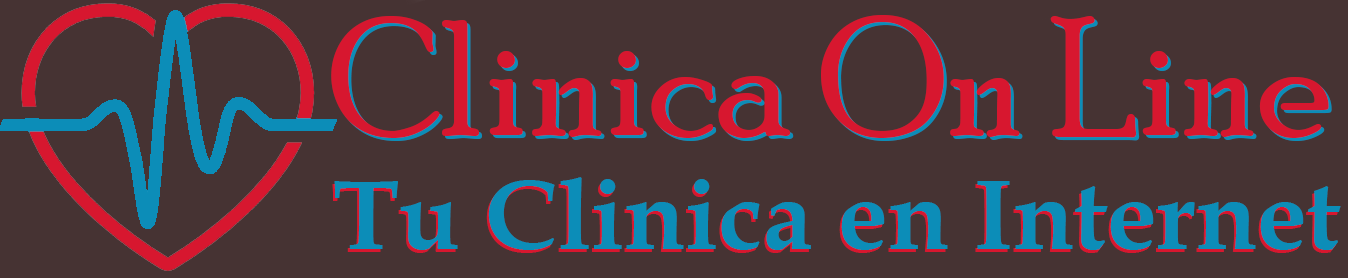
<style>
.page{position:relative;width:1348px;height:278px;background:#463333}
.page>*{position:absolute;margin:0}
.t1{font:166.7px "PoorRichard-Regular";color:#d7172f}
.t2{font:100px "BookAntiqua-Bold";color:#0c8db8}
</style>
<div class="page">
<p class="t1" style="left:331px;top:15px;width:998px;height:123px">Clinica On Line</p>
<p class="t1" style="left:334px;top:18px;width:998px;height:123px">Clinica On Line</p>
<p class="t2" style="left:332px;top:180px;width:1007px;height:73px">Tu Clinica en Internet</p>
<p class="t2" style="left:334px;top:177px;width:1007px;height:73px">Tu Clinica en Internet</p>
</div>
